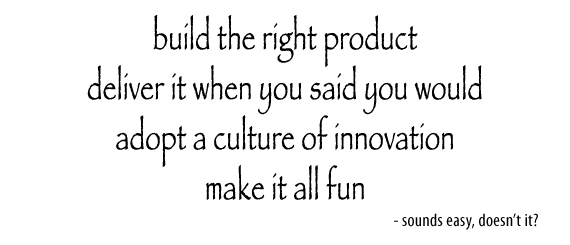
<style>
.page{position:relative;width:570px;height:245px;background:#ffffff}
.page>*{position:absolute;margin:0}
.t1{font:36px/50px "Papyrus-Condensed";letter-spacing:0.02em;color:#000000}
.t2{font:18px "MyriadPro-Cond";letter-spacing:0.02em;color:#000000}
</style>
<div class="page">
<p class="t1" style="left:87px;top:15px;width:395px;height:185px;text-align:center">build the right product<br>deliver it when you said you would<br>adopt a culture of innovation<br>make it all fun</p>
<p class="t2" style="left:394px;top:213px;width:144px;height:17px">- sounds easy, doesn’t it?</p>
</div>
